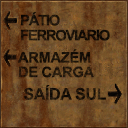
<style>
.page{position:relative;width:128px;height:128px}
.page>*{position:absolute;margin:0}
.t1{font:14.7px/15.1px "Arial-BoldMT";letter-spacing:-0.08em;color:#1a1109;text-transform:uppercase}
.t2{font:14.7px/14.7px "Arial-BoldMT";letter-spacing:-0.02em;color:#1f150a;text-transform:uppercase}
.t3{font:16px "Arial-BoldMT";letter-spacing:-0.02em;color:#1f150a;text-transform:uppercase}
</style>
<div class="page">
<p class="t1" style="left:21px;top:12px;width:89px;height:29px">Pátio <br>FERROVIARIO</p>
<p class="t2" style="left:17px;top:49px;width:78px;height:29px">Armazém<br>de carga</p>
<p class="t3" style="left:23px;top:85px;width:83px;height:15px">Saída sul</p>
</div>
